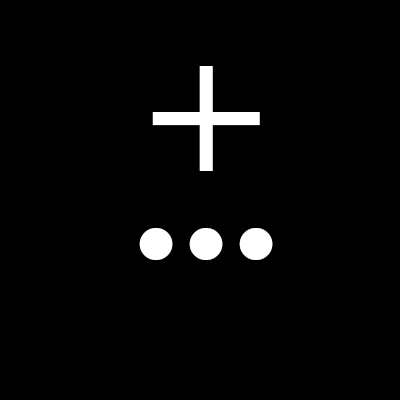
<style>
.page{position:relative;width:400px;height:400px;background:#000000}
.page>*{position:absolute;margin:0}
.t1{font:200px "TimesNewRomanPS-BoldMT";color:#ffffff}
</style>
<div class="page">
<p class="t1" style="left:152px;top:66px;width:108px;height:105px">+</p>
<p class="t1" style="left:139px;top:228px;width:134px;height:32px">...</p>
</div>
